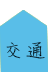
<style>
.page{position:relative;width:48px;height:72px;background:#59bee8}
.page>*{position:absolute;margin:0}
.t1{font:22px "DFYa-W3-WIN-BF";color:#000000}
</style>
<div class="page">
<p class="t1" style="left:6px;top:42px;width:39px;height:17px">交通</p>
</div>
